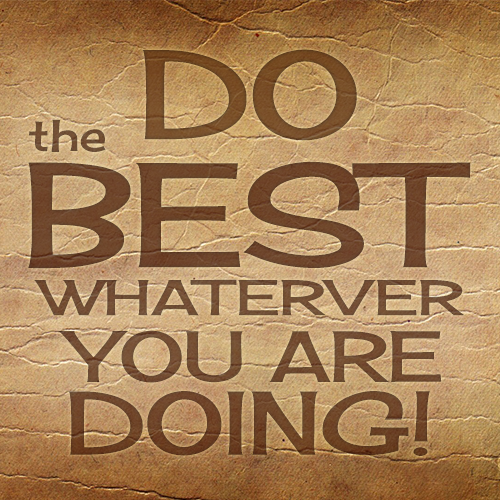
<style>
.page{position:relative;width:500px;height:500px}
.page>*{position:absolute;margin:0}
.t1{font:123.5px "CherryCreamSodaRegular";color:#754c27}
.t2{font:44.5px "CherryCreamSodaRegular";color:#6f4e35}
.t3{font:144.4px "CherryCreamSodaRegular";color:#6d442a}
.t4{font:49px "CherryCreamSodaRegular";color:#714e35;text-transform:uppercase;scale:1.14 1}
.t5{font:70.8px "CherryCreamSodaRegular";color:#724d32}
.t6{font:88.1px "CherryCreamSodaRegular";color:#6b4327}
</style>
<div class="page">
<p class="t1" style="left:142px;top:49px;width:215px;height:92px">DO</p>
<p class="t2" style="left:29px;top:119px;width:77px;height:33px">the</p>
<p class="t3" style="left:28px;top:161px;width:443px;height:108px">BEST</p>
<p class="t4" style="left:34px;top:279px;width:431px;height:37px">whaterver</p>
<p class="t5" style="left:58px;top:330px;width:384px;height:53px">YOU ARE</p>
<p class="t6" style="left:68px;top:391px;width:363px;height:65px">DOING!</p>
</div>
